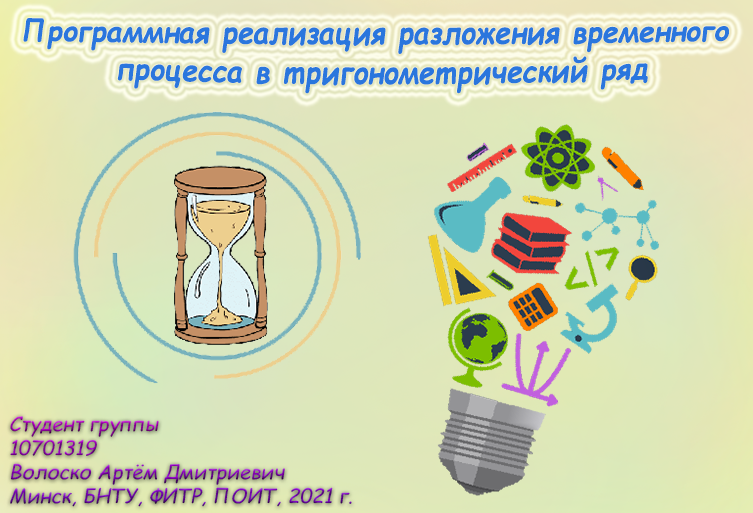
<style>
.page{position:relative;width:753px;height:513px}
.page>*{position:absolute;margin:0}
.t1{font:28.4px "ComicSansMS-BoldItalic";color:#2a76dd}
.t2{font:20px "ComicSansMS-Italic"}
</style>
<div class="page">
<p class="t1" style="left:23px;top:18px;width:706px;height:76px;text-align:center">Программная реализация разложения временного <br>процесса в тригонометрический ряд</p>
<p class="t2" style="left:10px;top:416px;width:342px;height:91px">Студент группы<br>10701319<br>Волоско Артём Дмитриевич<br>Минск, БНТУ, ФИТР, ПОИТ, 2021 г.</p>
</div>
